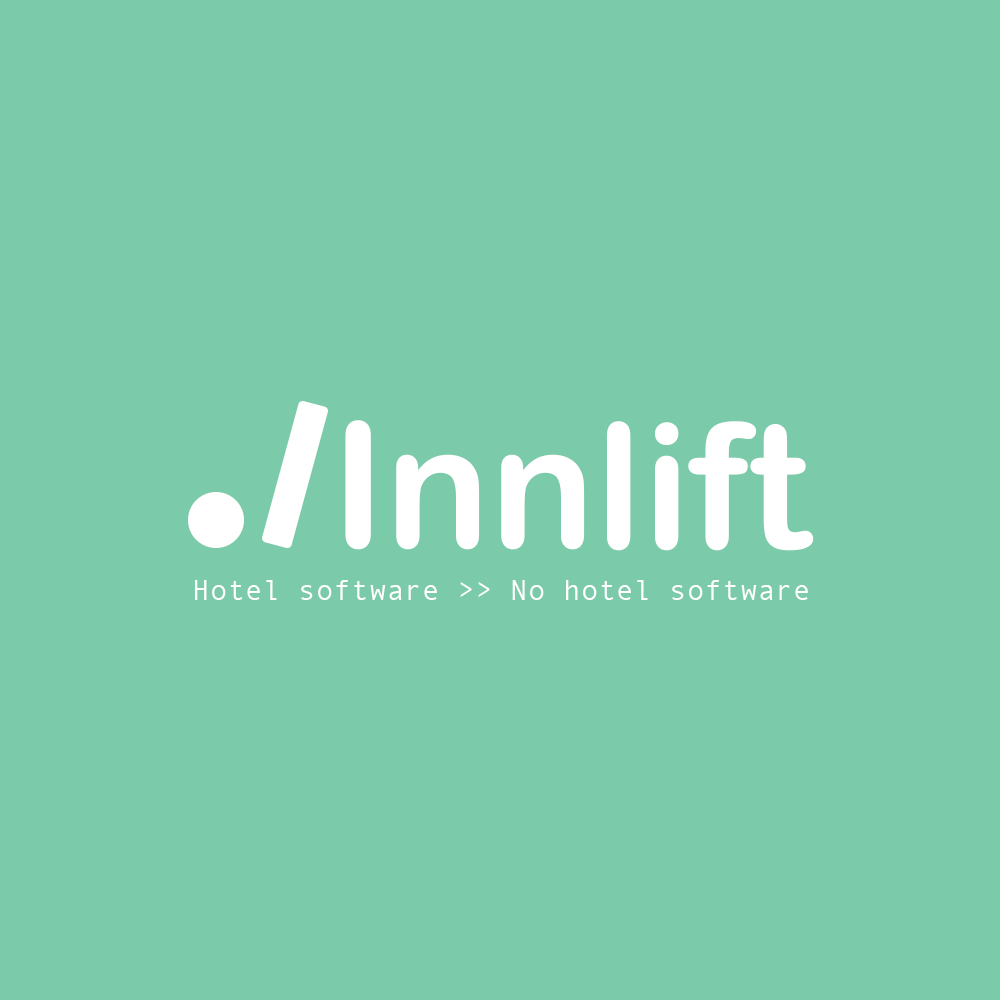
<style>
.page{position:relative;width:1000px;height:1000px;background:#7bcbaa}
.page>*{position:absolute;margin:0}
.t1{font:174.3px "ArialRoundedMTBold";color:#ffffff}
.t2{font:29.4px "AndaleMono";color:#ffffff}
</style>
<div class="page">
<p class="t1" style="left:345px;top:420px;width:469px;height:131px">Innlift</p>
<p class="t2" style="left:195px;top:580px;width:613px;height:20px">Hotel software &gt;&gt; No hotel software</p>
</div>
